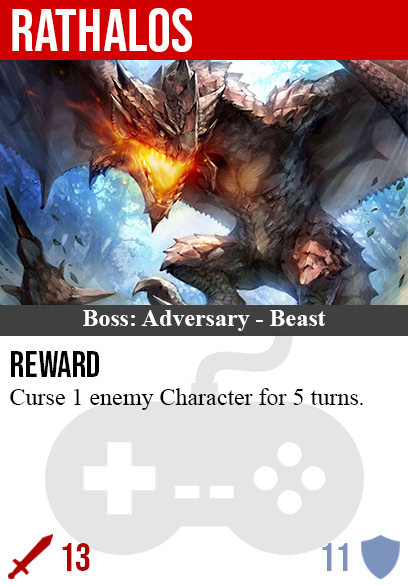
<style>
.page{position:relative;width:408px;height:585px;background:#ffffff}
.page>*{position:absolute;margin:0}
.t1{font:60px "BebasNeue-Regular";color:#ffffff}
.t2{font:24px "TimesNewRomanPS-BoldMT";color:#ffffff}
.t3{font:36px "BebasNeue-Regular";color:#000000}
.t4{font:24px "TimesNewRomanPSMT";color:#000000}
.t5{font:40px "BebasNeue-Regular";color:#af0202}
.t6{font:40px "BebasNeue-Regular";color:#7c94bd}
</style>
<div class="page">
<p class="t1" style="left:12px;top:8px;width:180px;height:44px">rathalos</p>
<p class="t2" style="left:83px;top:310px;width:243px;height:21px">Boss: Adversary - Beast</p>
<p class="t3" style="left:11px;top:351px;width:88px;height:26px">reward</p>
<p class="t4" style="left:10px;top:388px;width:353px;height:22px">Curse 1 enemy Character for 5 turns.</p>
<p class="t5" style="left:62px;top:543px;width:28px;height:28px">13</p>
<p class="t6" style="left:322px;top:543px;width:26px;height:28px">11</p>
</div>
